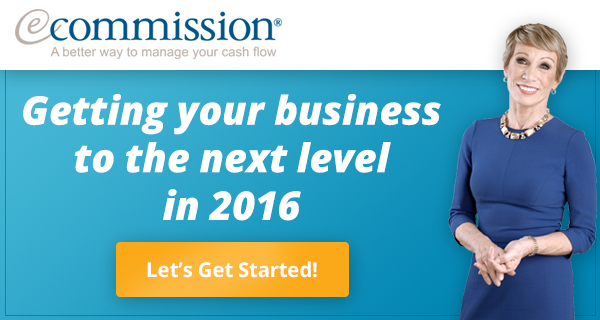
<style>
.page{position:relative;width:600px;height:320px;background:#ffffff}
.page>*{position:absolute;margin:0}
.t1{font:39.6px "OpenSans-ExtraboldItalic";color:#ffffff}
.t2{font:20.2px "OpenSans-Bold";color:#ffffff}
</style>
<div class="page">
<p class="t1" style="left:23px;top:93px;width:418px;height:128px;text-align:center">Getting your business<br>to the next level<br>in 2016</p>
<p class="t2" style="left:147px;top:261px;width:170px;height:17px">Let’s Get Started!</p>
</div>
